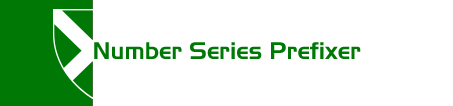
<style>
.page{position:relative;width:453px;height:106px;background:#ffffff}
.page>*{position:absolute;margin:0}
.t1{font:24px "Slicker";color:#007806}
</style>
<div class="page">
<p class="t1" style="left:94px;top:42px;width:267px;height:17px">Number Series Prefixer</p>
</div>
